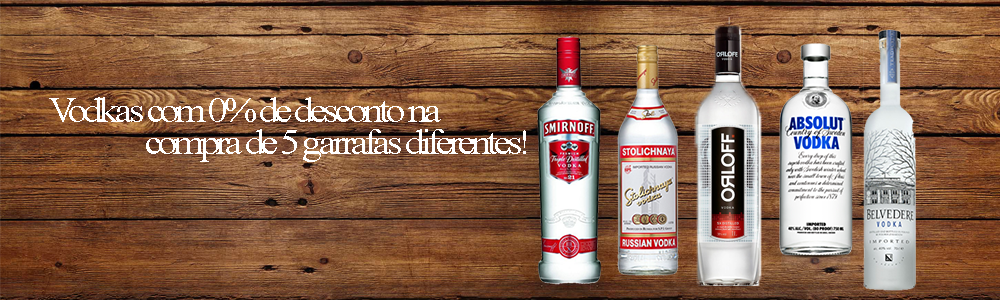
<style>
.page{position:relative;width:1000px;height:300px}
.page>*{position:absolute;margin:0}
.t1{font:36px/32px "TimesNewRomanPSMT";letter-spacing:-0.1em;color:#ffffff;scale:1.1 1}
</style>
<div class="page">
<p class="t1" style="left:49px;top:97px;width:477px;height:65px;text-align:center">Vodkas com 0% de desconto na <br>     compra de 5 garrafas diferentes!</p>
</div>
